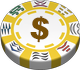
<style>
.page{position:relative;width:80px;height:70px}
.page>*{position:absolute;margin:0}
.t1{font:30px "Arial-Black";color:#794f07}
</style>
<div class="page">
<p class="t1" style="left:30px;top:16px;width:19px;height:27px;rotate:6deg">$</p>
</div>
